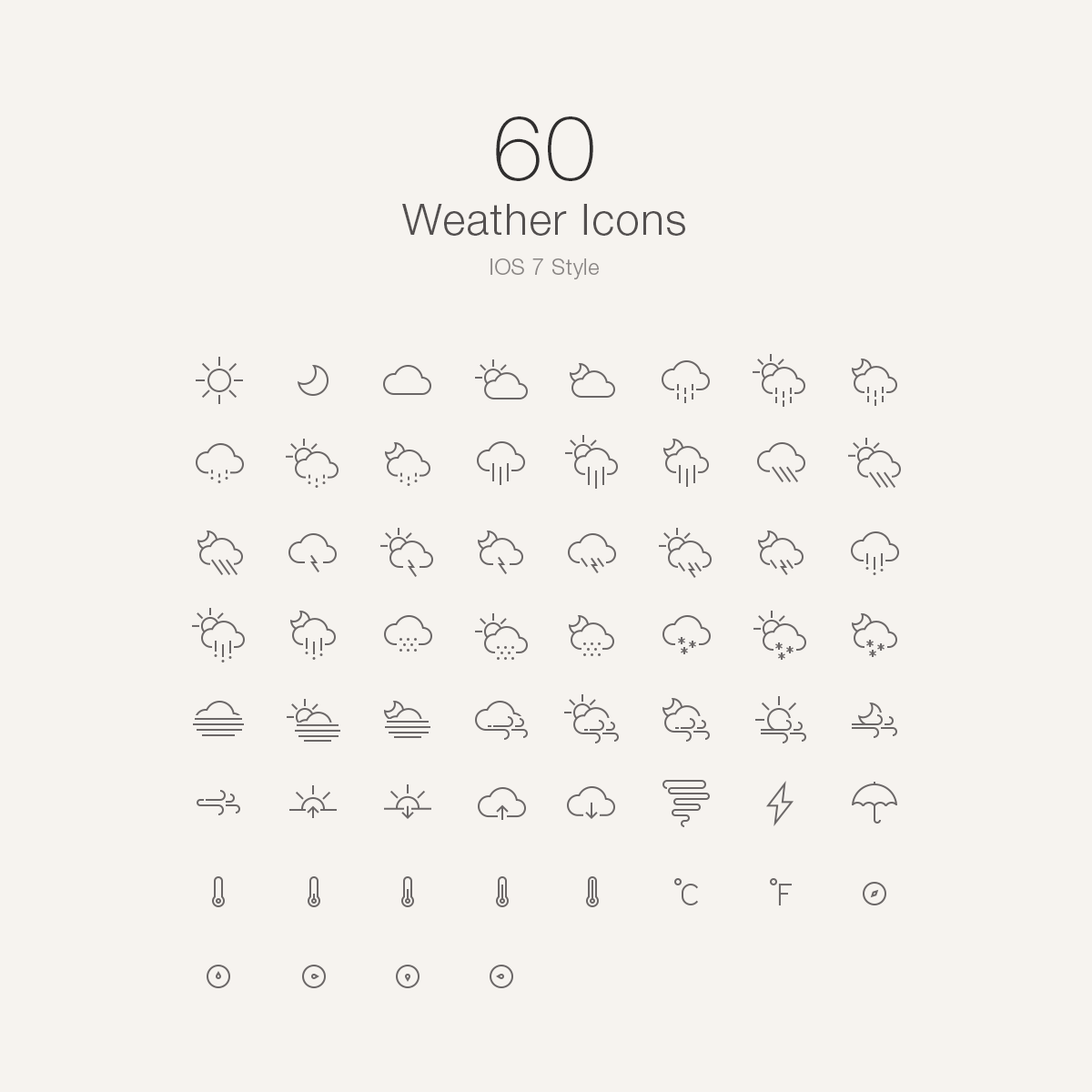
<style>
.page{position:relative;width:1092px;height:1092px;background:#f6f3ef}
.page>*{position:absolute;margin:0}
.t1{font:43.7px/54.6px "HelveticaNeueLTStd-Lt";letter-spacing:0.025em;color:#534f4f}
.t2{font:91px/45.5px "HelveticaNeueLTStd-Th";letter-spacing:0.025em;color:#302e2e}
.t3{font:21.8px/40px "HelveticaNeueLTStd-Lt";letter-spacing:0.025em;color:#8b8786}
</style>
<div class="page">
<p class="t1" style="left:402px;top:116px;width:283px;height:163px;text-align:center"><span class="t2">60<br></span>Weather Icons<br><span class="t3">IOS 7 Style</span></p>
</div>
